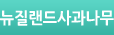
<style>
.page{position:relative;width:114px;height:35px}
.page>*{position:absolute;margin:0}
.t1{font:16px "NanumGothicExtraBold";color:#ffffff;scale:0.95 1}
</style>
<div class="page">
<p class="t1" style="left:0px;top:10px;width:114px;height:16px">뉴질랜드사과나무</p>
</div>
